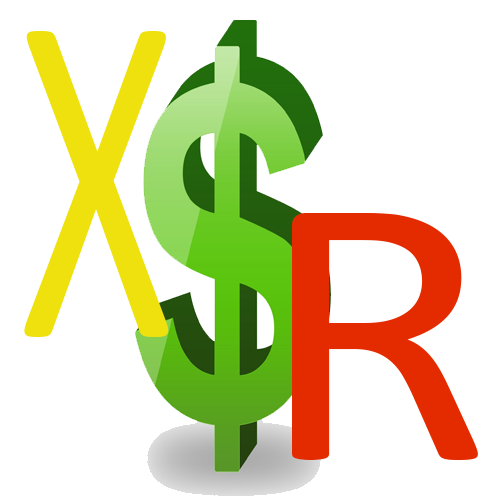
<style>
.page{position:relative;width:500px;height:500px;background:#ffffff}
.page>*{position:absolute;margin:0}
.t1{font:480.8px "Calibri";color:#eee10d;scale:0.64 1}
.t2{font:389.5px "Calibri";color:#e42b00;scale:1.13 1}
</style>
<div class="page">
<p class="t1" style="left:24px;top:31px;width:145px;height:306px">X</p>
<p class="t2" style="left:292px;top:213px;width:186px;height:247px">R</p>
</div>
